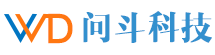
<style>
.page{position:relative;width:215px;height:55px;background:#ffffff}
.page>*{position:absolute;margin:0}
.t1{font:37.3px "Geometric212BT-BookCondensed";letter-spacing:-0.02em;color:#ff7711;font-weight:bold}
.t2{font:32.7px "RTWSShangYaDemo-Regular";color:#3390ce;font-weight:bold}
</style>
<div class="page">
<p class="t1" style="left:48px;top:13px;width:25px;height:31px">D</p>
<p class="t2" style="left:83px;top:11px;width:129px;height:32px">问斗科技</p>
</div>
